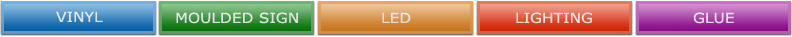
<style>
.page{position:relative;width:792px;height:37px}
.page>*{position:absolute;margin:0}
.t1{font:14px "Verdana";color:#e2e2e2;scale:1.1 1}
.t2{font:14px "Verdana";color:#e1e1e1;scale:1.1 1}
</style>
<div class="page">
<p class="t1" style="left:56px;top:11px;width:47px;height:11px">VINYL</p>
<p class="t2" style="left:176px;top:12px;width:122px;height:12px">MOULDED SIGN</p>
<p class="t1" style="left:382px;top:12px;width:29px;height:11px">LED</p>
<p class="t1" style="left:516px;top:12px;width:76px;height:12px">LIGHTING</p>
<p class="t2" style="left:693px;top:12px;width:41px;height:12px">GLUE</p>
</div>
